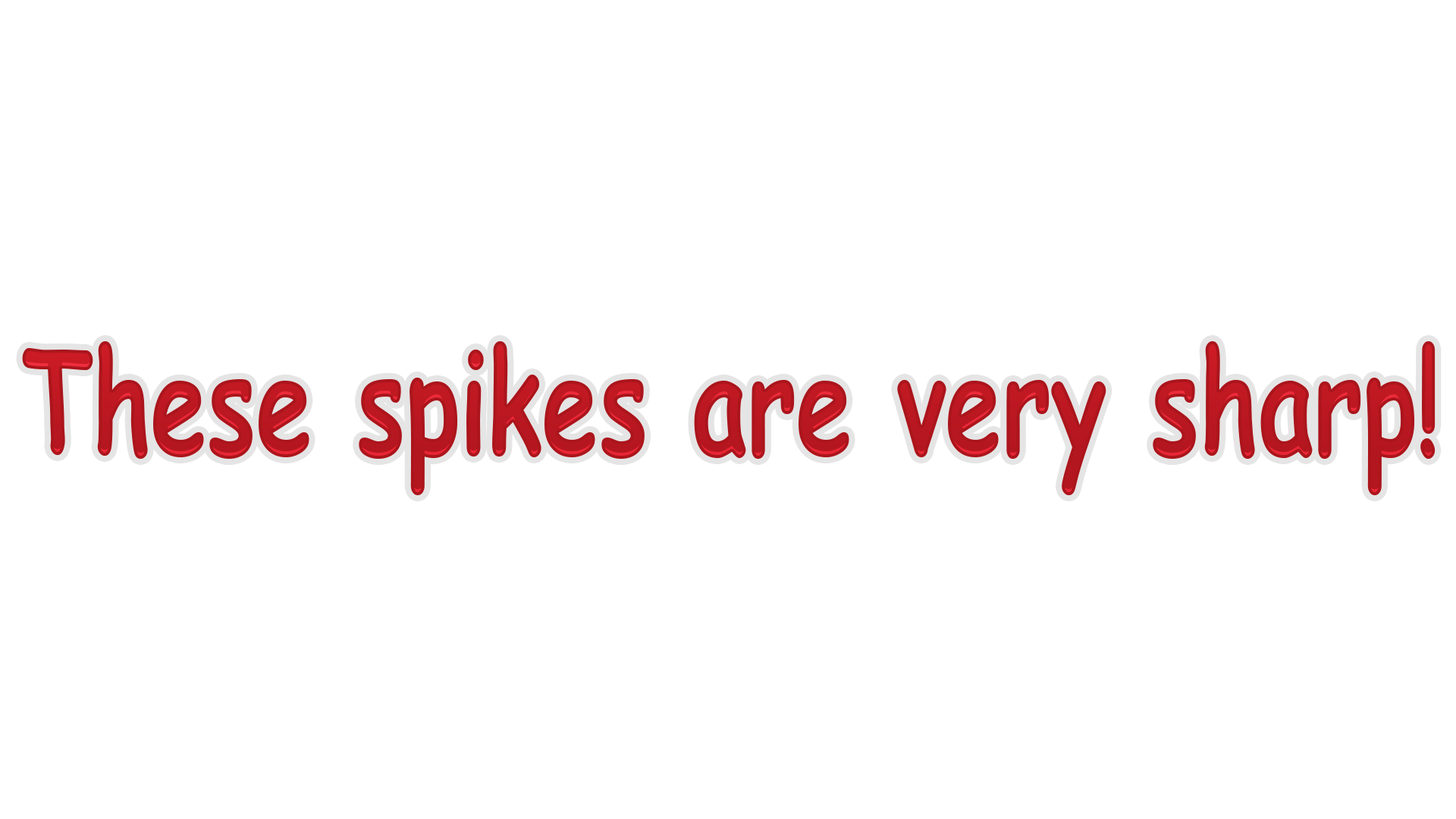
<style>
.page{position:relative;width:1456px;height:819px;background:#ffffff}
.page>*{position:absolute;margin:0}
.t1{font:144.1px "ComicSansMS-Bold";color:#b61720;scale:0.7 1}
</style>
<div class="page">
<p class="t1" style="left:22px;top:341px;width:1414px;height:154px">These spikes are very sharp!</p>
</div>
